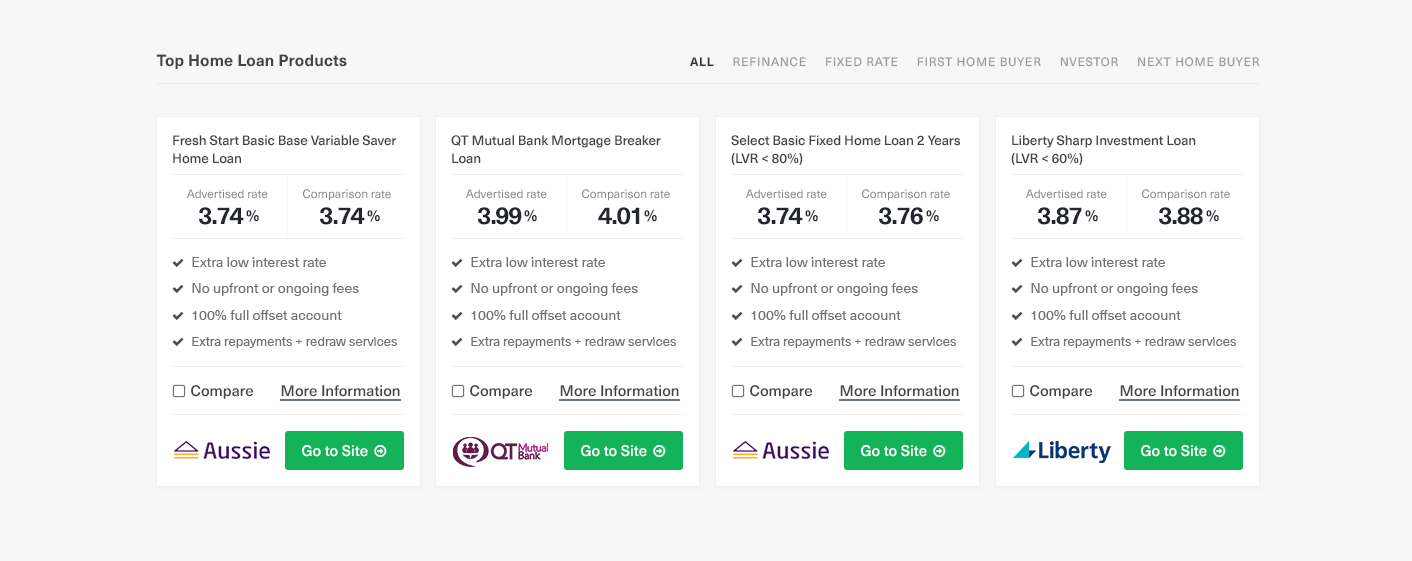
<style>
.page{position:relative;width:1412px;height:561px;background:#f7f7f7}
.page>*{position:absolute;margin:0}
.t1{font:16px "NeueHaasUnicaPro-Bold";letter-spacing:0.01em;color:#444444}
.t2{font:12px "NeueHaasUnicaPro-Regular";letter-spacing:0.07em;color:#999999;text-transform:uppercase}
.t3{font:12px "NeueHaasUnicaPro-Bold";letter-spacing:0.07em;color:#333333}
.t4{font:13.5px/18.3px "NeueHaasUnicaPro-Medium";letter-spacing:-0.01em;color:#444444}
.t5{font:13.5px/18.3px "NeueHaasUnicaPro-Medium";letter-spacing:-0.01em;color:#444444;text-transform:uppercase}
.t6{font:12px "NeueHaasUnicaPro-Regular";color:#838383}
.t7{font:24px "NeueHaasUnicaPro-Bold";letter-spacing:-0.05em;color:#24262d}
.t8{font:15.2px "NeueHaasUnicaPro-Bold";color:#24262d}
.t9{font:15px "NeueHaasUnicaPro-Medium";color:#444444}
</style>
<div class="page">
<p class="t1" style="left:156px;top:54px;width:191px;height:15px">Top Home Loan Products</p>
<p class="t2" style="left:690px;top:57px;width:570px;height:10px"><span class="t3">ALL     </span>refinance     fixed rate     first home buyer     nvestor     next home buyer</p>
<p class="t4" style="left:173px;top:135px;width:224px;height:29px"><span class="t5">F</span>resh Start Basic Base Variable Saver <br>Home Loan</p>
<p class="t4" style="left:451px;top:135px;width:210px;height:29px">QT Mutual Bank Mortgage Breaker <br>Loan</p>
<p class="t4" style="left:731px;top:135px;width:229px;height:30px">Select Basic Fixed Home Loan 2 Years <br>(LVR &lt; 80%)</p>
<p class="t4" style="left:1011px;top:135px;width:185px;height:30px">Liberty Sharp Investment Loan <br>(LVR &lt; 60%)</p>
<p class="t6" style="left:186px;top:189px;width:82px;height:10px">Advertised rate</p>
<p class="t6" style="left:303px;top:189px;width:88px;height:12px">Comparison rate</p>
<p class="t6" style="left:465px;top:189px;width:82px;height:10px">Advertised rate</p>
<p class="t6" style="left:582px;top:189px;width:88px;height:12px">Comparison rate</p>
<p class="t6" style="left:745px;top:189px;width:82px;height:10px">Advertised rate</p>
<p class="t6" style="left:862px;top:189px;width:88px;height:12px">Comparison rate</p>
<p class="t6" style="left:1025px;top:189px;width:82px;height:10px">Advertised rate</p>
<p class="t6" style="left:1142px;top:189px;width:88px;height:12px">Comparison rate</p>
<p class="t7" style="left:199px;top:207px;width:45px;height:18px">3.74</p>
<p class="t7" style="left:320px;top:207px;width:45px;height:18px">3.74</p>
<p class="t7" style="left:478px;top:207px;width:44px;height:18px">3.99</p>
<p class="t7" style="left:598px;top:207px;width:42px;height:18px">4.01</p>
<p class="t7" style="left:758px;top:207px;width:45px;height:18px">3.74</p>
<p class="t7" style="left:879px;top:207px;width:44px;height:18px">3.76</p>
<p class="t7" style="left:1038px;top:207px;width:44px;height:18px">3.87</p>
<p class="t7" style="left:1159px;top:207px;width:44px;height:18px">3.88</p>
<p class="t8" style="left:246px;top:210px;width:13px;height:12px">%</p>
<p class="t8" style="left:367px;top:210px;width:13px;height:12px">%</p>
<p class="t8" style="left:524px;top:210px;width:13px;height:12px">%</p>
<p class="t8" style="left:644px;top:210px;width:13px;height:12px">%</p>
<p class="t8" style="left:805px;top:210px;width:13px;height:12px">%</p>
<p class="t8" style="left:926px;top:210px;width:13px;height:12px">%</p>
<p class="t8" style="left:1085px;top:210px;width:13px;height:12px">%</p>
<p class="t8" style="left:1206px;top:210px;width:13px;height:12px">%</p>
<p class="t9" style="left:191px;top:385px;width:62px;height:14px">Compare</p>
<p class="t9" style="left:281px;top:385px;width:119px;height:12px">More Information</p>
<p class="t9" style="left:470px;top:385px;width:62px;height:14px">Compare</p>
<p class="t9" style="left:560px;top:385px;width:119px;height:12px">More Information</p>
<p class="t9" style="left:750px;top:385px;width:62px;height:14px">Compare</p>
<p class="t9" style="left:840px;top:385px;width:119px;height:12px">More Information</p>
<p class="t9" style="left:1030px;top:385px;width:62px;height:14px">Compare</p>
<p class="t9" style="left:1120px;top:385px;width:119px;height:12px">More Information</p>
</div>
